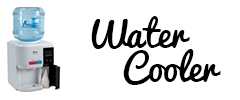
<style>
.page{position:relative;width:240px;height:100px;background:#ffffff}
.page>*{position:absolute;margin:0}
.t1{font:36px "Pacifico";color:#000000}
</style>
<div class="page">
<p class="t1" style="left:91px;top:16px;width:99px;height:33px">Water</p>
<p class="t1" style="left:123px;top:49px;width:98px;height:36px">Cooler</p>
</div>
